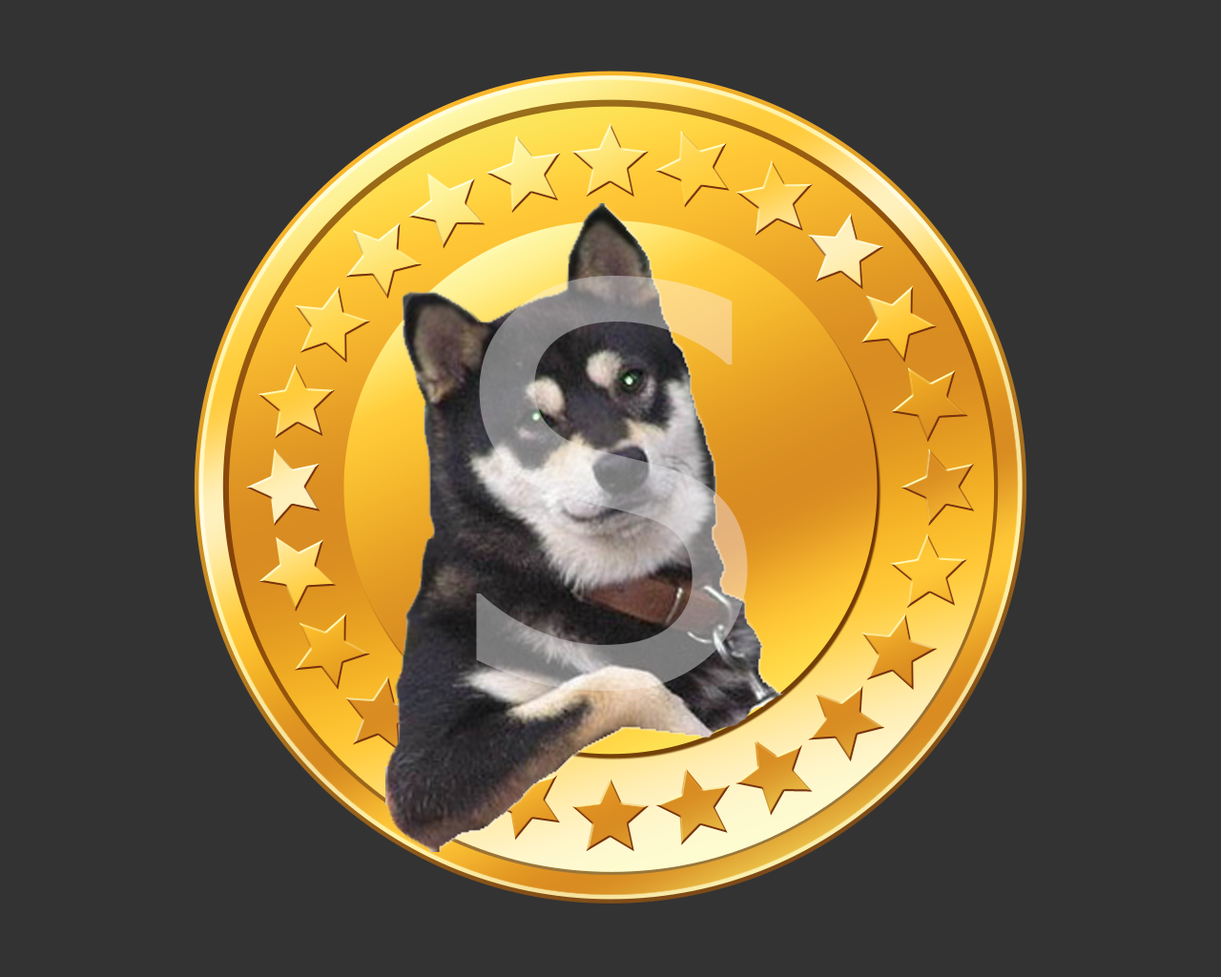
<style>
.page{position:relative;width:1221px;height:977px;background:#333333}
.page>*{position:absolute;margin:0}
.t1{font:547.9px "Tahoma"}
</style>
<div class="page">
<p class="t1" style="left:476px;top:276px;width:272px;height:415px">S</p>
</div>
